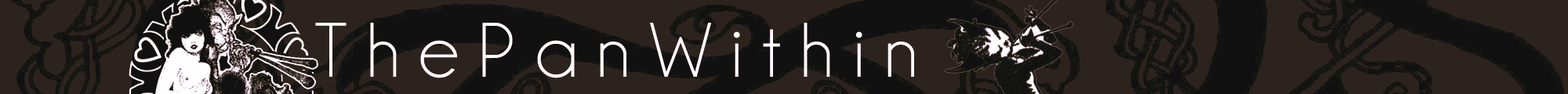
<style>
.page{position:relative;width:1568px;height:94px;background:#2d231e}
.page>*{position:absolute;margin:0}
.t1{font:78.4px "Champagne&Limousines";color:#ffffff}
</style>
<div class="page">
<p class="t1" style="left:315px;top:23px;width:599px;height:55px">T h e P a n W i t h i n</p>
</div>
